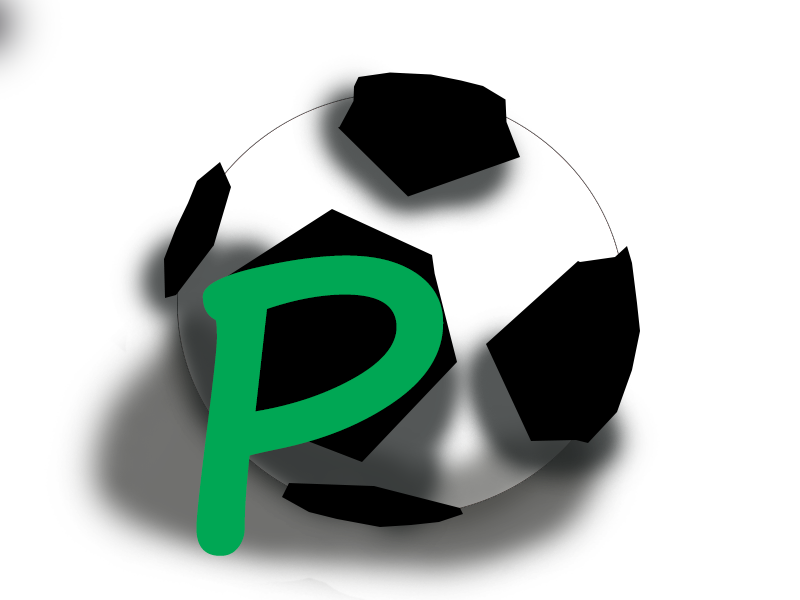
<style>
.page{position:relative;width:800px;height:600px;background:#ffffff}
.page>*{position:absolute;margin:0}
.t1{font:400px "SegoePrint-Bold";color:#00a754}
</style>
<div class="page">
<p class="t1" style="left:196px;top:255px;width:248px;height:301px">P</p>
</div>
